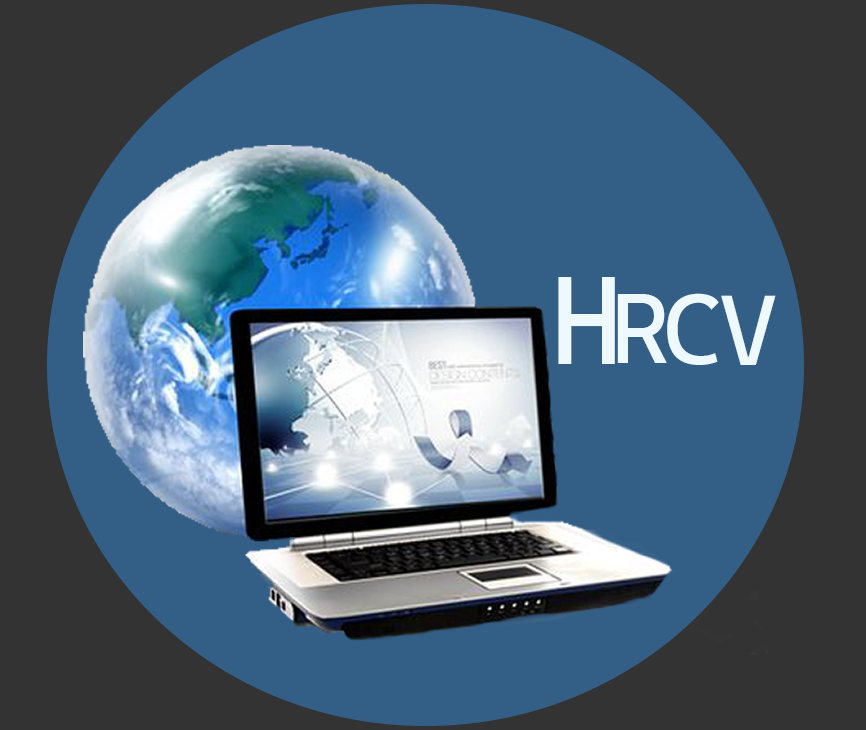
<style>
.page{position:relative;width:866px;height:730px;background:#335f87}
.page>*{position:absolute;margin:0}
.t1{font:125px "CascadiaCode-Regular";letter-spacing:-0.1em;color:#edf8ff}
.t2{font:100px "CascadiaCode-Regular";letter-spacing:-0.1em;color:#edf8ff}
</style>
<div class="page">
<p class="t1" style="left:558px;top:277px;width:57px;height:87px">H</p>
<p class="t2" style="left:617px;top:294px;width:50px;height:69px">R</p>
<p class="t2" style="left:667px;top:293px;width:52px;height:72px">C</p>
<p class="t2" style="left:721px;top:295px;width:55px;height:70px">V</p>
</div>
